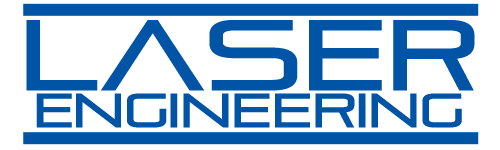
<style>
.page{position:relative;width:500px;height:150px;background:#ffffff}
.page>*{position:absolute;margin:0}
.t1{font:48px/37px "Pirulen";color:#0054a6}
.t2{font:100px "Pirulen";color:#0054a6}
</style>
<div class="page">
<p class="t1" style="left:26px;top:20px;width:449px;height:108px;text-align:center"><span class="t2">LAsER<br></span>Engineering</p>
</div>
